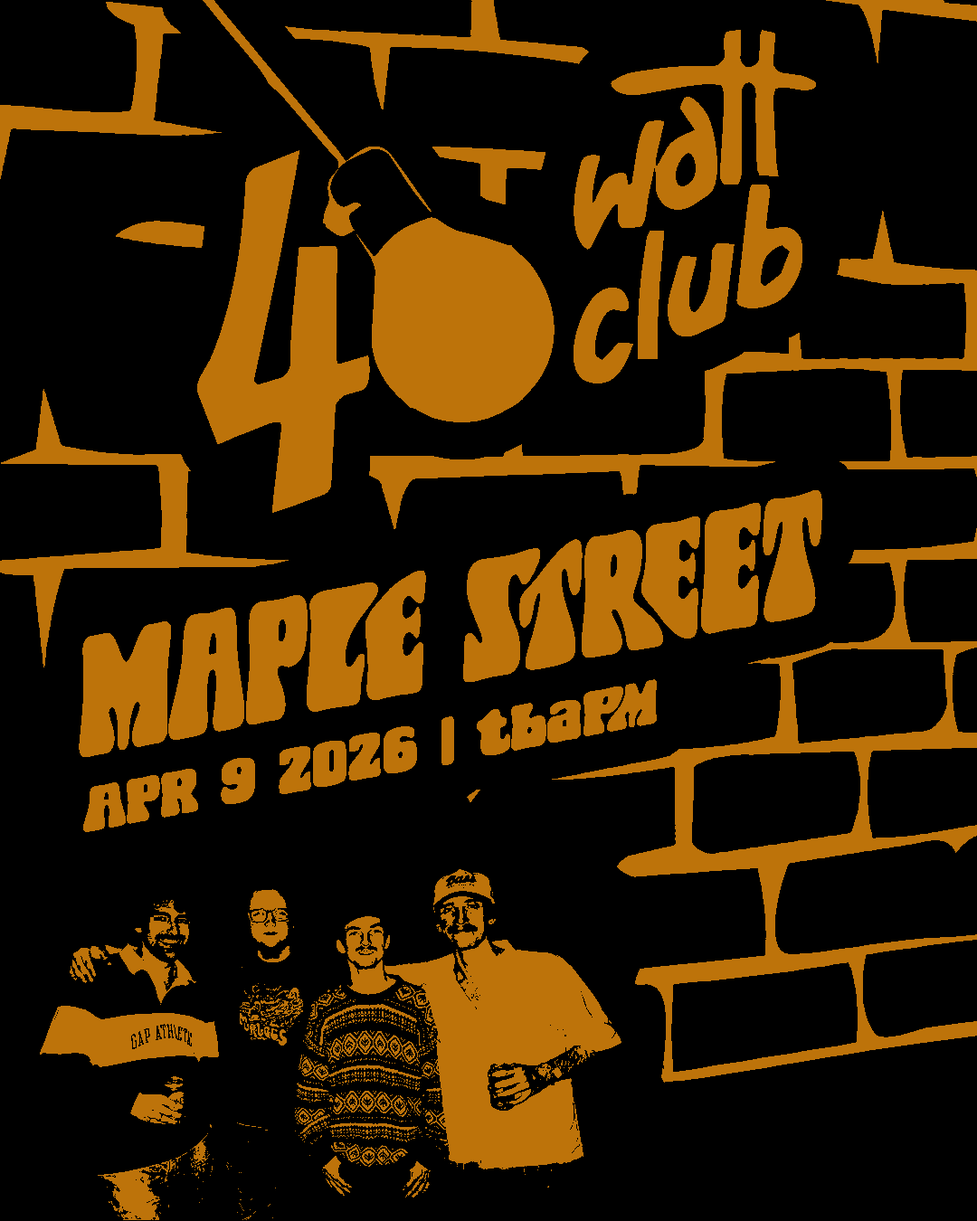
<style>
.page{position:relative;width:977px;height:1221px;background:#000000}
.page>*{position:absolute;margin:0}
.t1{font:144.3px "FatKatRegular";color:#bd730a;scale:0.64 1}
.t2{font:52.5px "FatKatRegular";color:#bd730a}
</style>
<div class="page">
<p class="t1" style="left:79px;top:489px;width:743px;height:269px;rotate:-11deg">MAPLE STREET</p>
<p class="t2" style="left:82px;top:679px;width:575px;height:153px;rotate:-11deg">APR 9 2026 | tbaPM</p>
</div>
